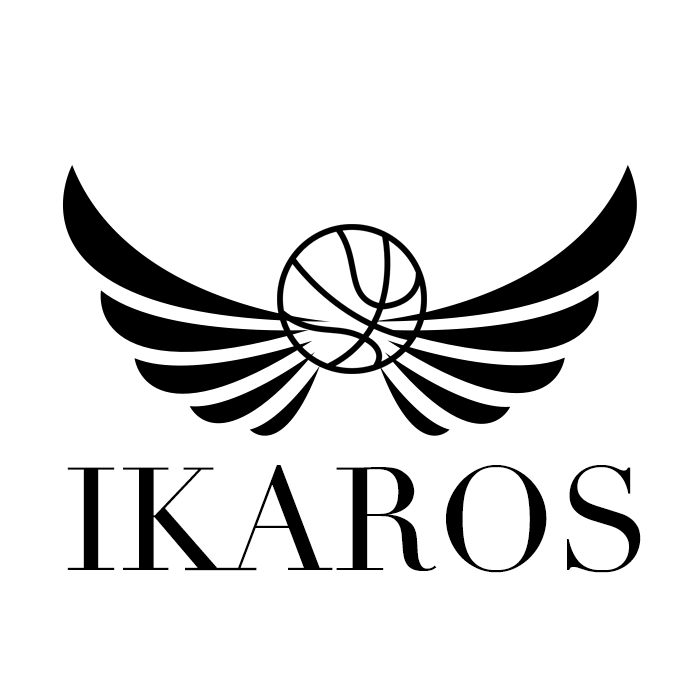
<style>
.page{position:relative;width:700px;height:700px;background:#ffffff}
.page>*{position:absolute;margin:0}
.t1{font:144px "Didot";color:#000000}
</style>
<div class="page">
<p class="t1" style="left:67px;top:465px;width:574px;height:108px">IKAROS</p>
</div>
